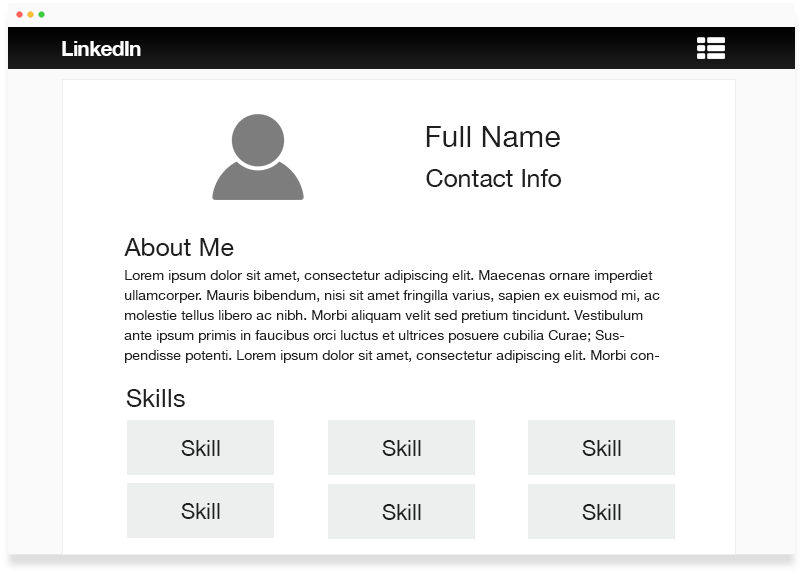
<style>
.page{position:relative;width:803px;height:574px;background:#ffffff}
.page>*{position:absolute;margin:0}
.t1{font:21.3px "HelveticaNeue-Bold";letter-spacing:-0.04em;color:#ffffff}
.t2{font:30px "HelveticaNeue";color:#1f1f1f}
.t3{font:25px "HelveticaNeue";color:#1f1f1f}
.t4{font:14px/20px "HelveticaNeue";color:#1f1f1f}
</style>
<div class="page">
<p class="t1" style="left:62px;top:41px;width:79px;height:15px">LinkedIn</p>
<p class="t2" style="left:426px;top:126px;width:134px;height:21px">Full Name</p>
<p class="t3" style="left:426px;top:169px;width:136px;height:18px">Contact Info</p>
<p class="t3" style="left:124px;top:238px;width:110px;height:18px">About Me</p>
<p class="t4" style="left:124px;top:270px;width:536px;height:93px">Lorem ipsum dolor sit amet, consectetur adipiscing elit. Maecenas ornare imperdiet ullamcorper. Mauris bibendum, nisi sit amet fringilla varius, sapien ex euismod mi, ac molestie tellus libero ac nibh. Morbi aliquam velit sed pretium tincidunt. Vestibulum ante ipsum primis in faucibus orci luctus et ultrices posuere cubilia Curae; Suspendisse potenti. Lorem ipsum dolor sit amet, consectetur adipiscing elit. Morbi condimentum pharetra felis vel condimentum. Sed tempus justo lacus. Mauris aliquam pellentesque nisi faucibus pharetra. Nunc imperdiet mi non nisi euismod dictum.</p>
<p class="t3" style="left:126px;top:389px;width:59px;height:18px">Skills</p>
</div>
